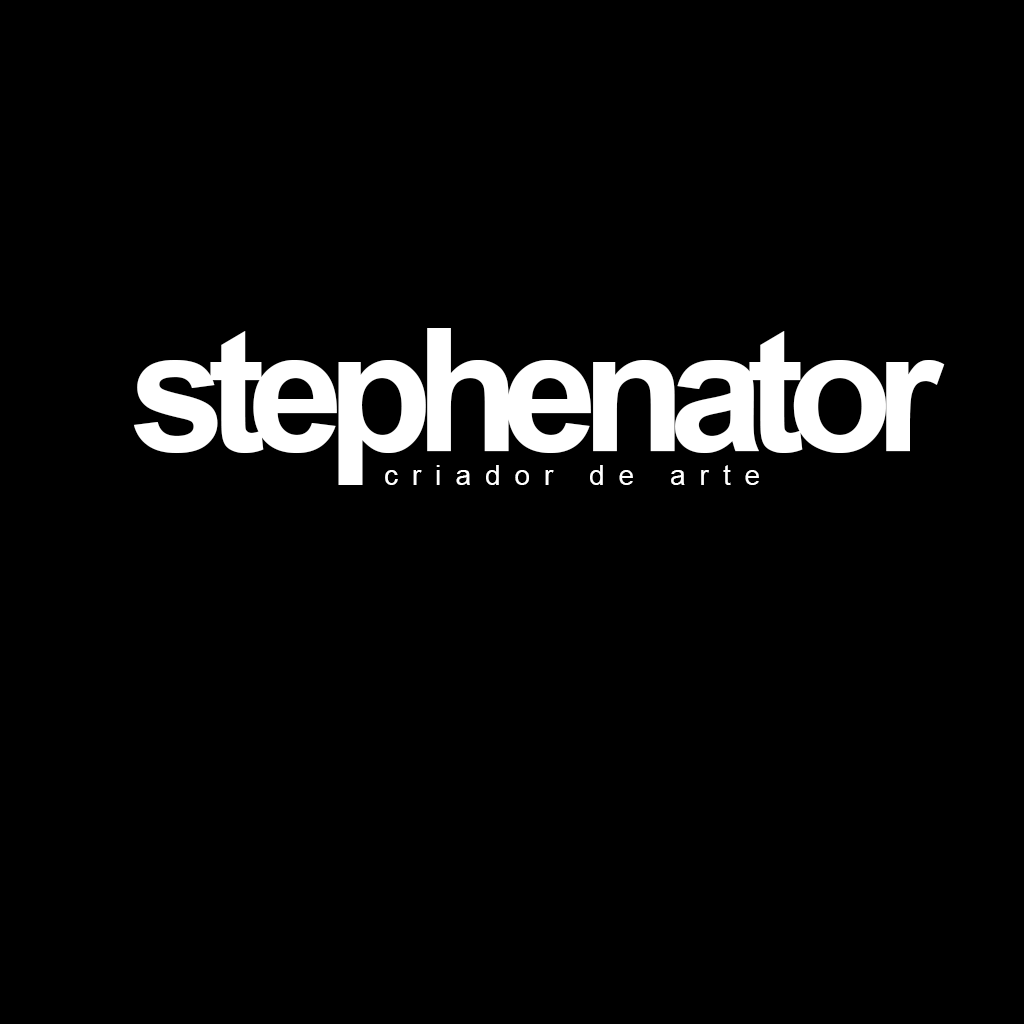
<style>
.page{position:relative;width:1024px;height:1024px;background:#000000}
.page>*{position:absolute;margin:0}
.t1{font:171.9px "Arial-BoldMT";letter-spacing:-0.1em;color:#ffffff}
.t2{font:28px "ArialMT";letter-spacing:0.5em;color:#ffffff}
</style>
<div class="page">
<p class="t1" style="left:133px;top:328px;width:812px;height:157px">stephenator</p>
<p class="t2" style="left:385px;top:465px;width:374px;height:20px">criador de arte</p>
</div>
